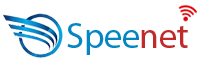
<style>
.page{position:relative;width:200px;height:71px;background:#ffffff}
.page>*{position:absolute;margin:0}
.t1{font:36px "MyriadPro-Regular";color:#0486c3}
.t2{font:36px "MyriadPro-Regular";color:#c12a2b}
</style>
<div class="page">
<p class="t1" style="left:67px;top:23px;width:72px;height:32px">Spee</p>
<p class="t2" style="left:141px;top:25px;width:47px;height:23px">net</p>
</div>
